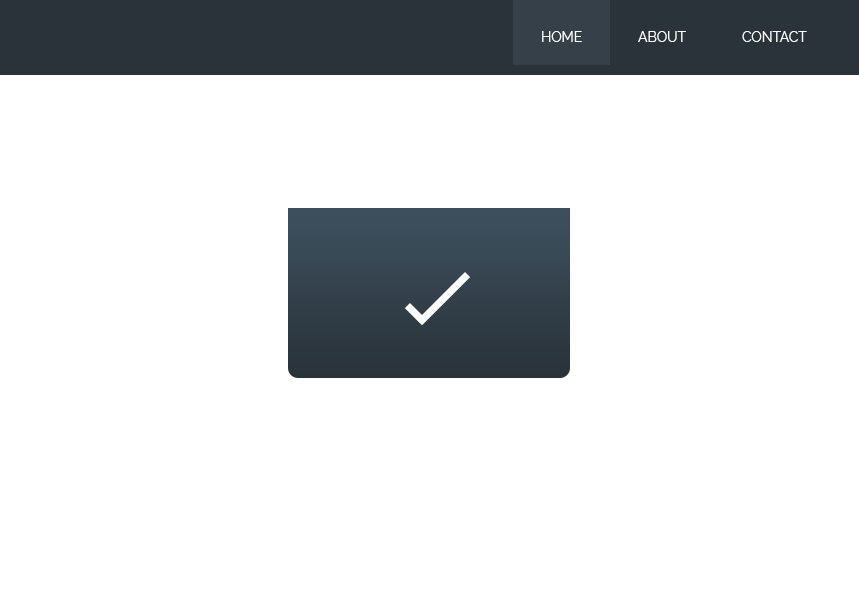
<style>
.page{position:relative;width:859px;height:600px;background:#ffffff}
.page>*{position:absolute;margin:0}
.t1{font:13.8px "Raleway-Regular";color:#ffffff}
</style>
<div class="page">
<p class="t1" style="left:542px;top:31px;width:265px;height:11px">HOME                ABOUT                CONTACT</p>
</div>
